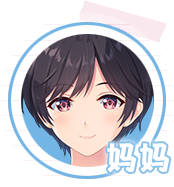
<style>
.page{position:relative;width:174px;height:187px;background:#ffffff}
.page>*{position:absolute;margin:0}
.t1{font:19.3px "shetumodengxiaofangti";color:#ffffff;font-weight:bold}
</style>
<div class="page">
<p class="t1" style="left:107px;top:143px;width:63px;height:29px">妈妈</p>
</div>
